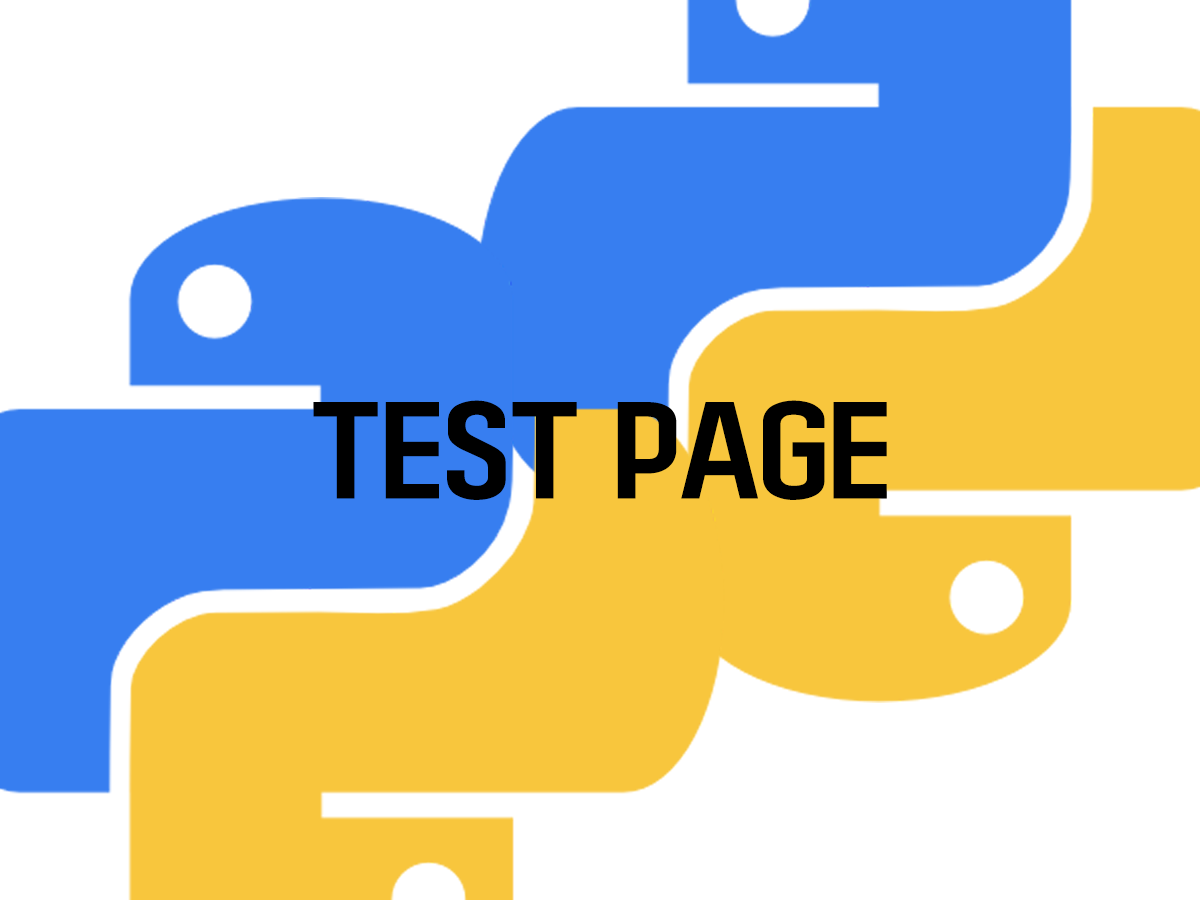
<style>
.page{position:relative;width:1200px;height:900px;background:#ffffff}
.page>*{position:absolute;margin:0}
.t1{font:104px "KoreanYNSJG5-R";color:#000000}
</style>
<div class="page">
<p class="t1" style="left:313px;top:400px;width:574px;height:100px">TEST PAGE</p>
</div>
